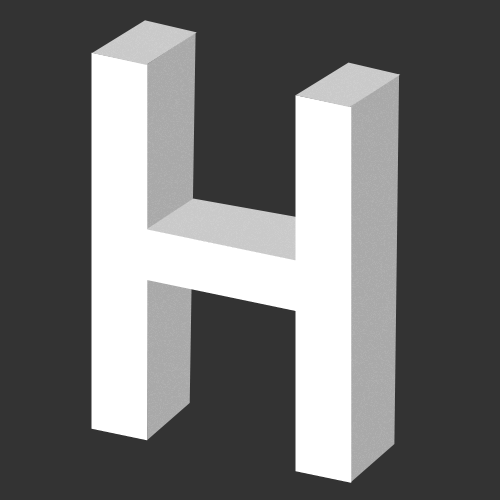
<style>
.page{position:relative;width:500px;height:500px;background:#333333}
.page>*{position:absolute;margin:0}
.t1{font:528.5px "Roboto-Medium";letter-spacing:0.028em;color:#ffffff;scale:0.9 1}
</style>
<div class="page">
<p class="t1" style="left:91px;top:52px;width:261px;height:431px;rotate:12deg">H</p>
</div>
